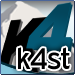
<style>
.page{position:relative;width:75px;height:75px}
.page>*{position:absolute;margin:0}
.t1{font:30px "ExpresswayFree";color:#000000}
</style>
<div class="page">
<p class="t1" style="left:18px;top:47px;width:52px;height:23px">k4st</p>
</div>
